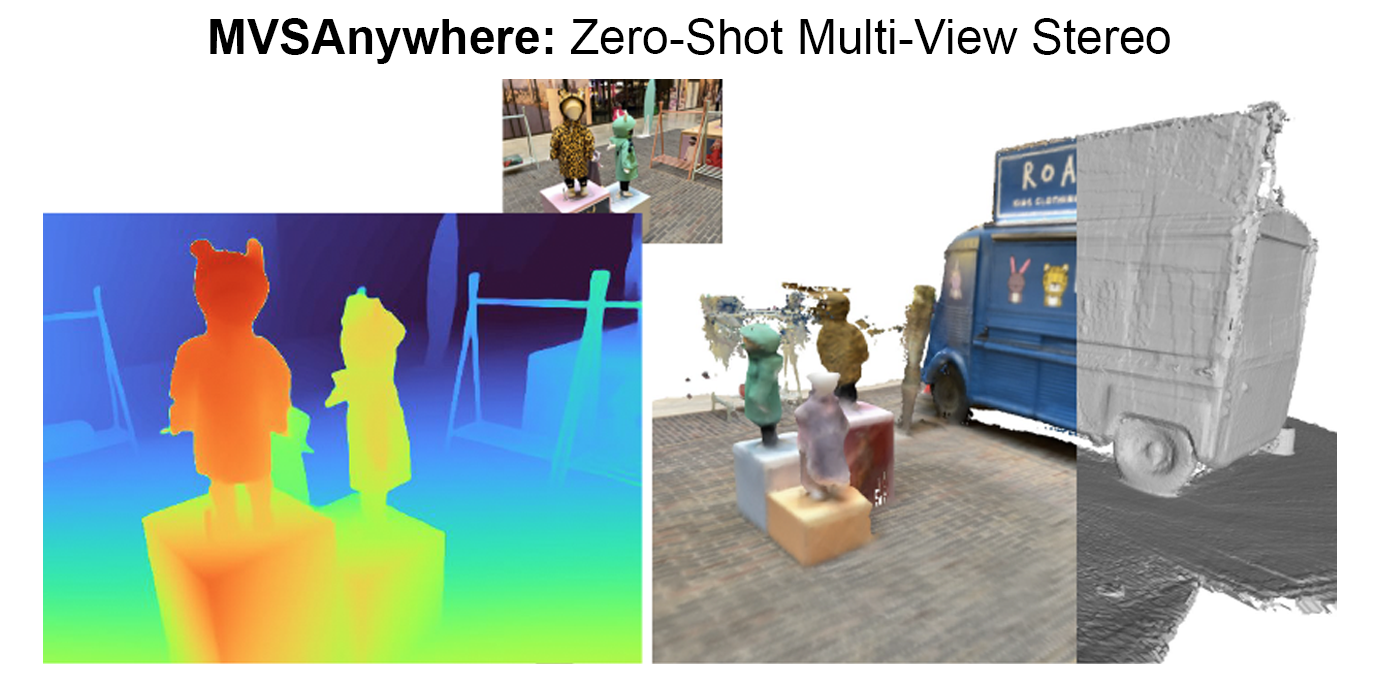
<style>
.page{position:relative;width:1380px;height:687px;background:#ffffff}
.page>*{position:absolute;margin:0}
.t1{font:48px "ArialMT";color:#000000}
.t2{font:48px "Arial-BoldMT";color:#000000}
</style>
<div class="page">
<p class="t1" style="left:210px;top:18px;width:960px;height:46px"><span class="t2">MVSAnywhere: </span>Zero-Shot Multi-View Stereo</p>
</div>
